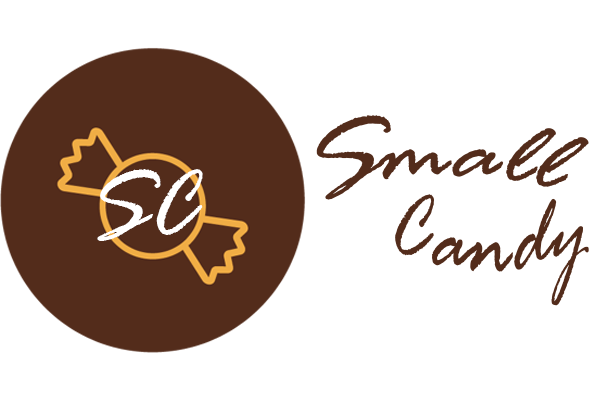
<style>
.page{position:relative;width:600px;height:400px;background:#ffffff}
.page>*{position:absolute;margin:0}
.t1{font:100px "RageItalic";color:#532c1b}
.t2{font:100.1px "RageItalic";color:#ffffff;scale:0.96 1}
.t3{font:83.3px "RageItalic";color:#532c1b}
</style>
<div class="page">
<p class="t1" style="left:316px;top:115px;width:273px;height:85px">Small</p>
<p class="t2" style="left:97px;top:169px;width:106px;height:72px">SC</p>
<p class="t3" style="left:395px;top:194px;width:194px;height:112px">Candy</p>
</div>
